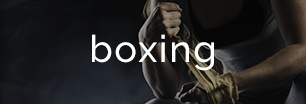
<style>
.page{position:relative;width:306px;height:104px}
.page>*{position:absolute;margin:0}
.t1{font:37.5px "Raleway-Medium";letter-spacing:0.05em;color:#ffffff}
</style>
<div class="page">
<p class="t1" style="left:92px;top:34px;width:122px;height:37px">boxing</p>
</div>
